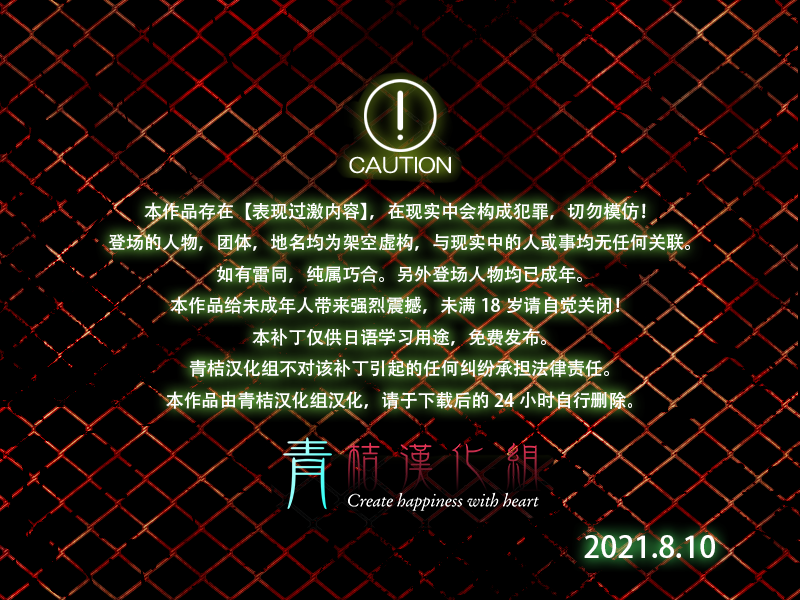
<style>
.page{position:relative;width:800px;height:600px;background:#000000}
.page>*{position:absolute;margin:0}
.t1{font:18px "AdobeHeitiStd-Regular";color:#ffffff}
.t2{font:30px "AdobeHeitiStd-Regular";color:#ffffff}
</style>
<div class="page">
<p class="t1" style="left:108px;top:202px;width:582px;height:207px;text-align:center">本作品存在【表现过激内容】，在现实中会构成犯罪，切勿模仿！<br>登场的人物，团体，地名均为架空虚构，与现实中的人或事均无任何关联。<br>如有雷同，纯属巧合。另外登场人物均已成年。<br>本作品给未成年人带来强烈震撼，未满18岁请自觉关闭！<br>本补丁仅供日语学习用途，免费发布。<br>青桔汉化组不对该补丁引起的任何纠纷承担法律责任。<br>本作品由青桔汉化组汉化，请于下载后的24小时自行删除。</p>
<p class="t2" style="left:584px;top:535px;width:131px;height:23px">2021.8.10</p>
</div>
